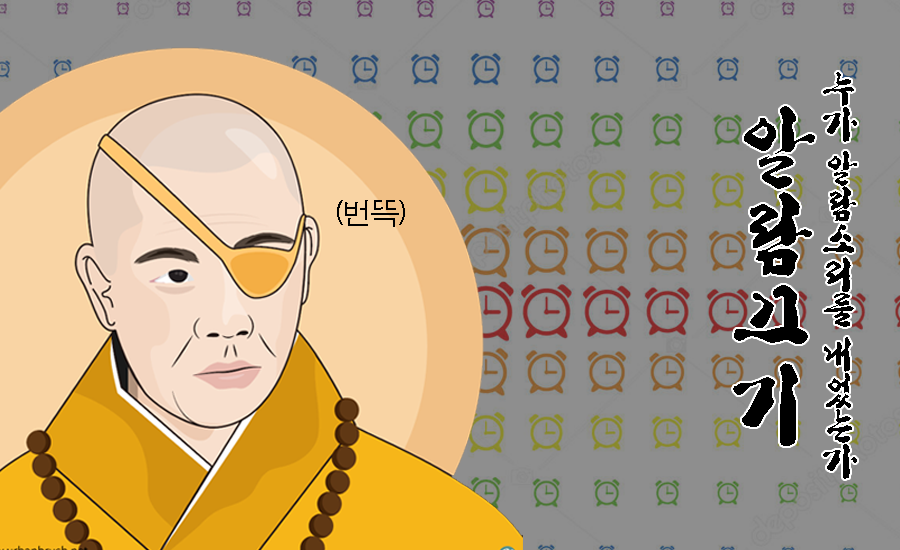
<style>
.page{position:relative;width:900px;height:550px;background:#8e8e8e}
.page>*{position:absolute;margin:0}
.t1{font:38px/10px "HYbsrB";letter-spacing:-0.075em;color:#000000}
.t2{font:90px/85px "HYbsrB";color:#000000}
.t3{font:30px "ÈÞ¸Õ°íµñ";letter-spacing:-0.075em;color:#000000}
</style>
<div class="page">
<p class="t1" style="left:823px;top:72px;width:34px;height:407px">누가 알람소리를 내었는가</p>
<p class="t2" style="left:733px;top:106px;width:82px;height:340px;text-align:center">알<br>람<br>끄<br>기</p>
<p class="t3" style="left:337px;top:200px;width:68px;height:27px">(번뜩)</p>
</div>
